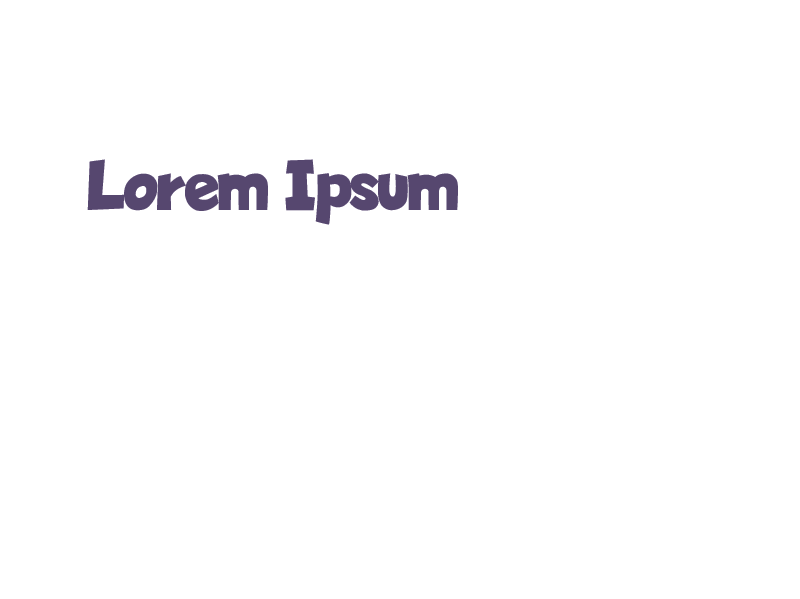
<style>
.page{position:relative;width:800px;height:599px;background:#ffffff}
.page>*{position:absolute;margin:0}
.t1{font:72px "LapsusPro-Bold";color:#56476f}
</style>
<div class="page">
<p class="t1" style="left:87px;top:159px;width:371px;height:66px">Lorem Ipsum</p>
</div>
